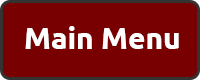
<style>
.page{position:relative;width:200px;height:80px;background:#790000}
.page>*{position:absolute;margin:0}
.t1{font:30px "Ubuntu-Bold";color:#ffffff}
</style>
<div class="page">
<p class="t1" style="left:25px;top:26px;width:154px;height:23px">Main Menu</p>
</div>
